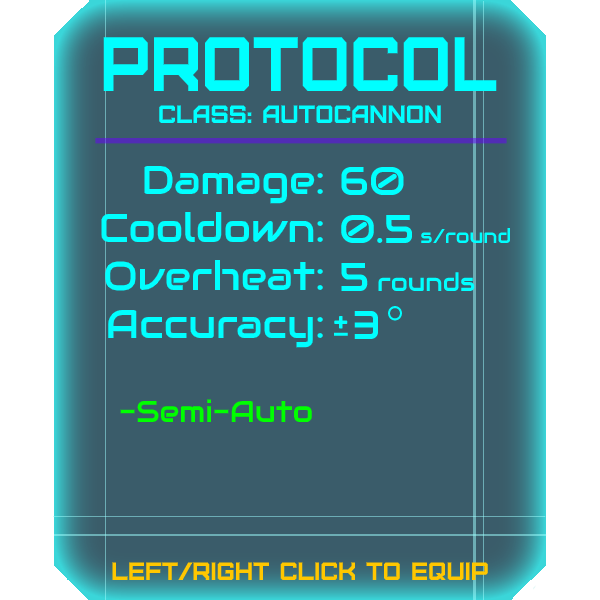
<style>
.page{position:relative;width:600px;height:600px;background:#3a5c6a}
.page>*{position:absolute;margin:0}
.t1{font:76.8px "Furore";color:#00ffff;scale:0.91 1}
.t2{font:25px "Furore";color:#00ffff}
.t3{font:40px "Audiowide-Regular";color:#00ffff}
.t4{font:20px "Audiowide-Regular";color:#00ffff}
.t5{font:25px "Audiowide-Regular";color:#00ffff}
.t6{font:30px "Audiowide-Regular";color:#00ff00}
.t7{font:25px "Furore";color:#ffc700}
</style>
<div class="page">
<p class="t1" style="left:103px;top:37px;width:394px;height:54px">protocol</p>
<p class="t2" style="left:159px;top:105px;width:282px;height:18px">Class: autocannon</p>
<p class="t3" style="left:101px;top:165px;width:222px;height:183px;text-align:right">Damage:<br>Cooldown:<br>Overheat:<br>Accuracy:</p>
<p class="t4" style="left:341px;top:166px;width:170px;height:173px"><span class="t3">60<br>0.5 </span>s/round<br><span class="t3">5 </span><span class="t5">rounds<br> </span><span class="t3">3</span></p>
<p class="t6" style="left:120px;top:399px;width:192px;height:23px"><span class="t3"><br><br><br><br><br></span>-Semi-Auto</p>
<p class="t7" style="left:112px;top:562px;width:376px;height:18px">left/right click to equip</p>
</div>
